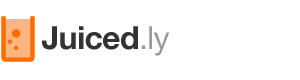
<style>
.page{position:relative;width:300px;height:80px;background:#ffffff}
.page>*{position:absolute;margin:0}
.t1{font:32px "HelveticaNeue-Bold";letter-spacing:-0.02em;color:#333333}
.t2{font:32px "HelveticaNeue";letter-spacing:-0.02em;color:#999999}
</style>
<div class="page">
<p class="t1" style="left:42px;top:26px;width:128px;height:30px">Juiced<span class="t2">.ly</span></p>
</div>
